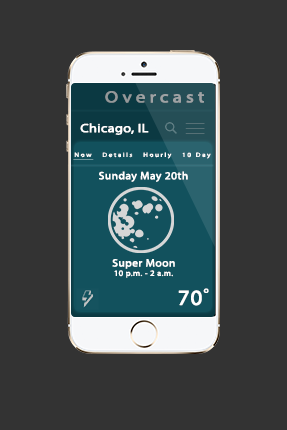
<style>
.page{position:relative;width:287px;height:430px;background:#333333}
.page>*{position:absolute;margin:0}
.t1{font:16.1px "MyriadPro-Regular";letter-spacing:0.2em;color:#949899;font-weight:bold;scale:1.18 1}
.t2{font:12px "MyriadPro-Regular";color:#ffffff;font-weight:bold;scale:1.18 1}
.t3{font:6px "MyriadPro-Regular";letter-spacing:0.2em;color:#ffffff;font-weight:bold;scale:1.18 1}
.t4{font:10.6px "MyriadPro-Regular";letter-spacing:0.02em;color:#ffffff;font-weight:bold;scale:1.07 1}
.t5{font:8px "MyriadPro-Regular";letter-spacing:0.02em;color:#ffffff;font-weight:bold;scale:1.07 1}
.t6{font:21.2px "MyriadPro-Regular";letter-spacing:0.02em;color:#ffffff;font-weight:bold;scale:1.07 1}
.t7{font:6px "MyriadPro-Regular";letter-spacing:0.02em;color:#ffffff;font-weight:bold;scale:1.18 1}
</style>
<div class="page">
<p class="t1" style="left:105px;top:91px;width:99px;height:12px">Overcast</p>
<p class="t2" style="left:80px;top:123px;width:69px;height:12px">Chicago, IL</p>
<p class="t3" style="left:74px;top:152px;width:137px;height:7px">Now   Details   Hourly   10 Day</p>
<p class="t4" style="left:99px;top:171px;width:89px;height:11px">Sunday May 20th</p>
<p class="t4" style="left:112px;top:259px;width:63px;height:10px">Super Moon</p>
<p class="t5" style="left:114px;top:270px;width:59px;height:8px">10 p.m. - 2 a.m.</p>
<p class="t6" style="left:178px;top:290px;width:24px;height:16px">70</p>
<p class="t7" style="left:203px;top:288px;width:6px;height:5px">O</p>
</div>
